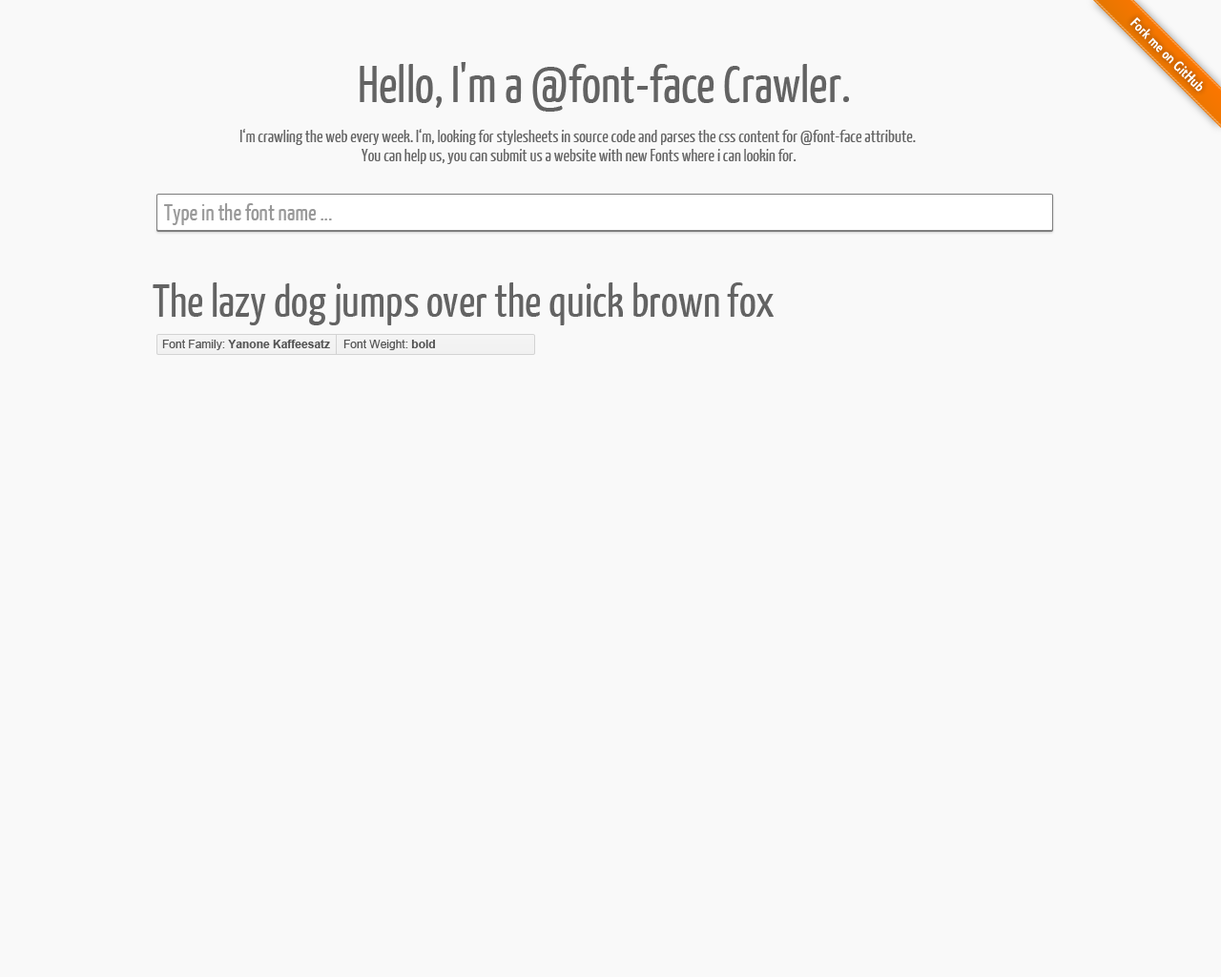
<style>
.page{position:relative;width:1221px;height:977px;background:#f9f9f9}
.page>*{position:absolute;margin:0}
.t1{font:51.4px "YanoneKaffeesatz-Regular";color:#636363}
.t2{font:17.2px/19.1px "YanoneKaffeesatz-Regular";color:#636363}
.t3{font:22.9px "YanoneKaffeesatz-Regular";color:#999999}
.t4{font:45.8px "YanoneKaffeesatz-Regular";color:#636363}
.t5{font:11.4px "Arial-BoldMT";color:#555555}
.t6{font:11.4px "ArialMT";color:#555555}
</style>
<div class="page">
<p class="t1" style="left:360px;top:62px;width:489px;height:50px">Hello, I'm a @font-face Crawler.</p>
<p class="t2" style="left:239px;top:129px;width:677px;height:35px;text-align:center">I‘m crawling the web every week. I‘m, looking for stylesheets in source code and parses the css content for @font-face attribute. <br>You can help us, you can submit us a website with new Fonts where i can lookin for.</p>
<p class="t3" style="left:164px;top:203px;width:168px;height:22px">Type in the font name ...</p>
<p class="t4" style="left:153px;top:282px;width:621px;height:43px">The lazy dog jumps over the quick brown fox</p>
<p class="t5" style="left:162px;top:340px;width:168px;height:10px"><span class="t6">Font Family:</span> Yanone Kaffeesatz</p>
<p class="t6" style="left:343px;top:340px;width:92px;height:10px">Font Weight: <span class="t5">bold</span></p>
</div>
